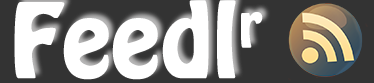
<style>
.page{position:relative;width:374px;height:83px;background:#333333}
.page>*{position:absolute;margin:0}
.t1{font:90px "HoboStd";color:#ffffff;font-weight:bold}
</style>
<div class="page">
<p class="t1" style="left:14px;top:0px;width:249px;height:80px">Feedlr</p>
</div>
